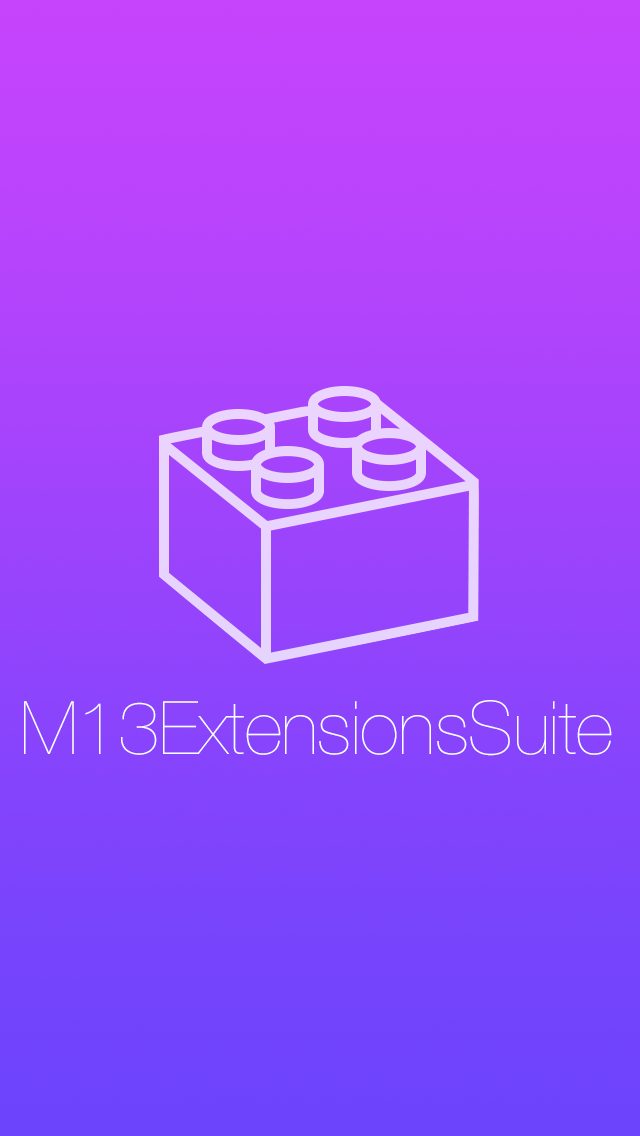
<style>
.page{position:relative;width:640px;height:1136px}
.page>*{position:absolute;margin:0}
.t1{font:74px "HelveticaNeue-UltraLight";letter-spacing:-0.007em;color:#ffffff}
</style>
<div class="page">
<p class="t1" style="left:24px;top:700px;width:588px;height:56px">M13ExtensionsSuite</p>
</div>
